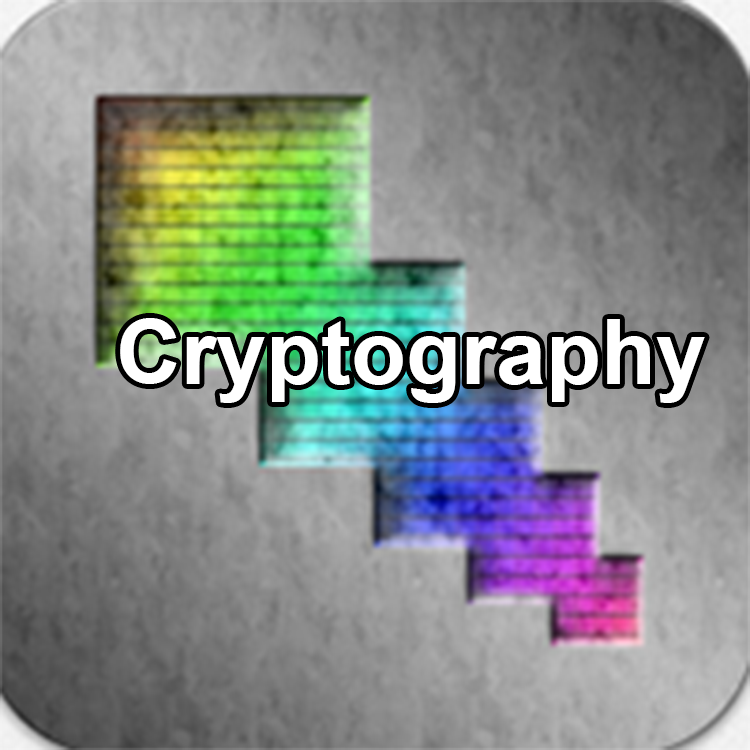
<style>
.page{position:relative;width:750px;height:750px}
.page>*{position:absolute;margin:0}
.t1{font:90px "Arial-BoldMT";color:#ffffff}
</style>
<div class="page">
<p class="t1" style="left:120px;top:318px;width:585px;height:85px">Cryptography</p>
</div>
